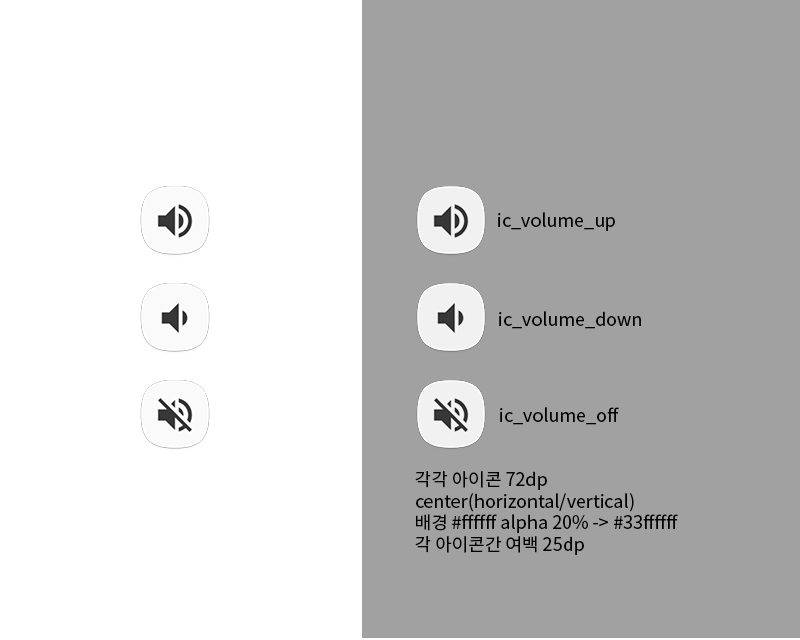
<style>
.page{position:relative;width:800px;height:640px;background:#a1a1a1}
.page>*{position:absolute;margin:0}
.t1{font:18px "NotoSansCJKkr-Regular";color:#000000}
</style>
<div class="page">
<p class="t1" style="left:498px;top:212px;width:117px;height:19px">ic_volume_up</p>
<p class="t1" style="left:499px;top:311px;width:142px;height:18px">ic_volume_down</p>
<p class="t1" style="left:500px;top:407px;width:119px;height:18px">ic_volume_off</p>
<p class="t1" style="left:415px;top:471px;width:263px;height:84px">각각 아이콘 72dp<br>center(horizontal/vertical)<br>배경 #ffffff alpha 20% -&gt; #33ffffff<br>각 아이콘간 여백 25dp</p>
</div>
